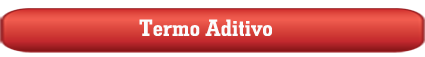
<style>
.page{position:relative;width:425px;height:57px;background:#ffffff}
.page>*{position:absolute;margin:0}
.t1{font:23.8px "GeometricSlab703BT-BoldCond";color:#fbfcfd;scale:1.19 1}
</style>
<div class="page">
<p class="t1" style="left:139px;top:19px;width:133px;height:17px">Termo Aditivo</p>
</div>
